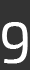
<style>
.page{position:relative;width:30px;height:70px;background:#333333}
.page>*{position:absolute;margin:0}
.t1{font:57px "Exo2-Regular";color:#ffffff}
</style>
<div class="page">
<p class="t1" style="left:2px;top:22px;width:26px;height:42px">9</p>
</div>
